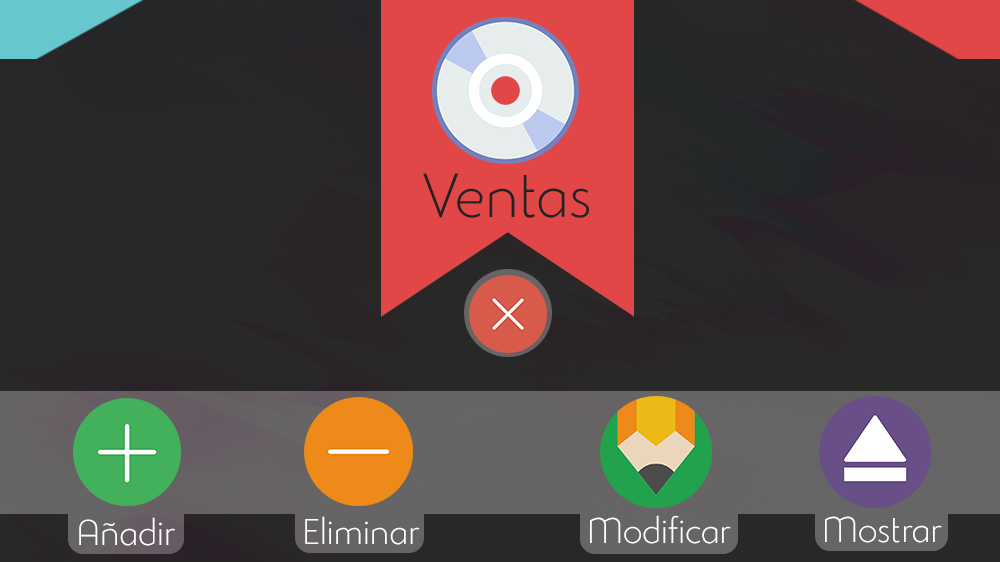
<style>
.page{position:relative;width:1000px;height:562px}
.page>*{position:absolute;margin:0}
.t1{font:61px "StudioGothicAlternateTrial-Extr";color:#232323}
.t2{font:35px "StudioGothicAlternateTrial-Extr";color:#ffffff}
</style>
<div class="page">
<p class="t1" style="left:423px;top:173px;width:166px;height:45px">Ventas</p>
<p class="t2" style="left:79px;top:517px;width:96px;height:29px">Añadir</p>
<p class="t2" style="left:305px;top:516px;width:115px;height:29px">Eliminar</p>
<p class="t2" style="left:590px;top:515px;width:141px;height:29px">Modificar</p>
<p class="t2" style="left:825px;top:516px;width:117px;height:27px">Mostrar</p>
</div>
